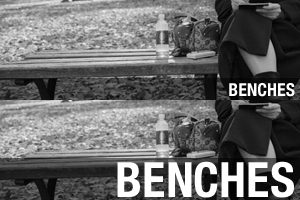
<style>
.page{position:relative;width:300px;height:200px}
.page>*{position:absolute;margin:0}
.t1{font:18px "HelveticaNeue-CondensedBold";color:#ffffff;text-transform:uppercase}
.t2{font:48.5px "HelveticaNeue-CondensedBold";color:#ffffff;text-transform:uppercase}
</style>
<div class="page">
<p class="t1" style="left:229px;top:83px;width:66px;height:14px">Benches</p>
<p class="t2" style="left:117px;top:161px;width:177px;height:37px">Benches</p>
</div>
